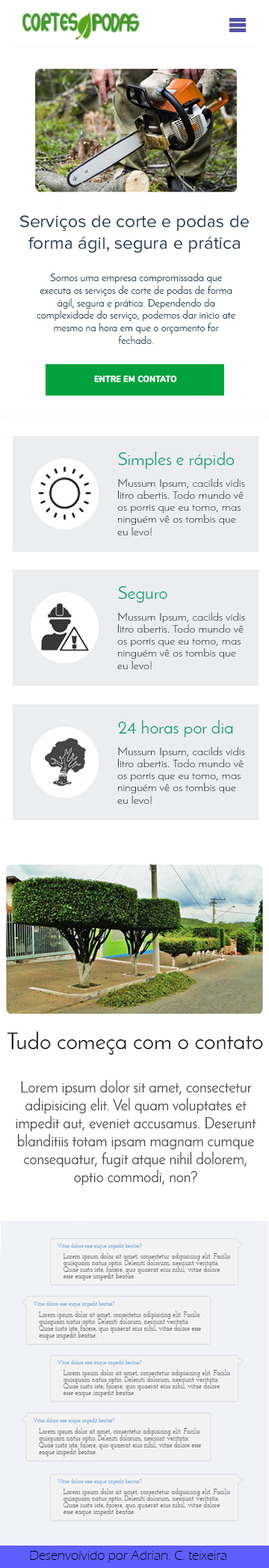
<style>
.page{position:relative;width:269px;height:1568px;background:#ffffff}
.page>*{position:absolute;margin:0}
.t1{font:17.9px "ProximaNovaSoft-Regular";color:#273f5b}
.t2{font:10.5px "JosefinSans";color:#273f5b}
.t3{font:17.9px "JosefinSans";color:#049e7e}
.t4{font:10.1px "JosefinSans-Light";color:#000000;scale:1.21 1}
.t5{font:23.2px "JosefinSans";color:#121212}
.t6{font:15px "JosefinSans";color:#474748}
.t7{font:13.5px "ErasITC-Light";color:#000000}
</style>
<div class="page">
<p class="t1" style="left:20px;top:215px;width:229px;height:38px;text-align:center">Serviços de corte e podas de forma ágil, segura e prática</p>
<p class="t2" style="left:37px;top:273px;width:199px;height:71px;text-align:center">Somos uma empresa compromissada que executa os serviços de corte de podas de forma ágil, segura e prática. Dependendo da complexidade do serviço, podemos dar inicio ate mesmo na hora em que o orçamento for fechado.</p>
<p class="t3" style="left:118px;top:452px;width:117px;height:17px">Simples e rápido</p>
<p class="t4" style="left:117px;top:479px;width:128px;height:56px">Mussum Ipsum, cacilds vidis litro abertis. Todo mundo vê os porris que eu tomo, mas ninguém vê os tombis que eu levo!</p>
<p class="t3" style="left:118px;top:586px;width:49px;height:17px">Seguro</p>
<p class="t4" style="left:117px;top:612px;width:128px;height:57px">Mussum Ipsum, cacilds vidis litro abertis. Todo mundo vê os porris que eu tomo, mas ninguém vê os tombis que eu levo!</p>
<p class="t3" style="left:118px;top:720px;width:115px;height:17px">24 horas por dia</p>
<p class="t4" style="left:117px;top:747px;width:128px;height:57px">Mussum Ipsum, cacilds vidis litro abertis. Todo mundo vê os porris que eu tomo, mas ninguém vê os tombis que eu levo!</p>
<p class="t5" style="left:7px;top:1031px;width:256px;height:24px">Tudo começa com o contato</p>
<p class="t6" style="left:16px;top:1080px;width:240px;height:105px;text-align:center">Lorem ipsum dolor sit amet, consectetur adipisicing elit. Vel quam voluptates et impedit aut, eveniet accusamus. Deserunt blanditiis totam ipsam magnam cumque consequatur, fugit atque nihil dolorem, optio commodi, non?</p>
<p class="t7" style="left:30px;top:1551px;width:197px;height:12px">Desenvolvido por Adrian. C. teixeira</p>
</div>
